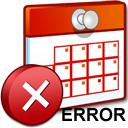
<style>
.page{position:relative;width:128px;height:128px;background:#ffffff}
.page>*{position:absolute;margin:0}
.t1{font:18px "Arial-BoldMT";color:#010101}
</style>
<div class="page">
<p class="t1" style="left:62px;top:107px;width:64px;height:15px">ERROR</p>
</div>
